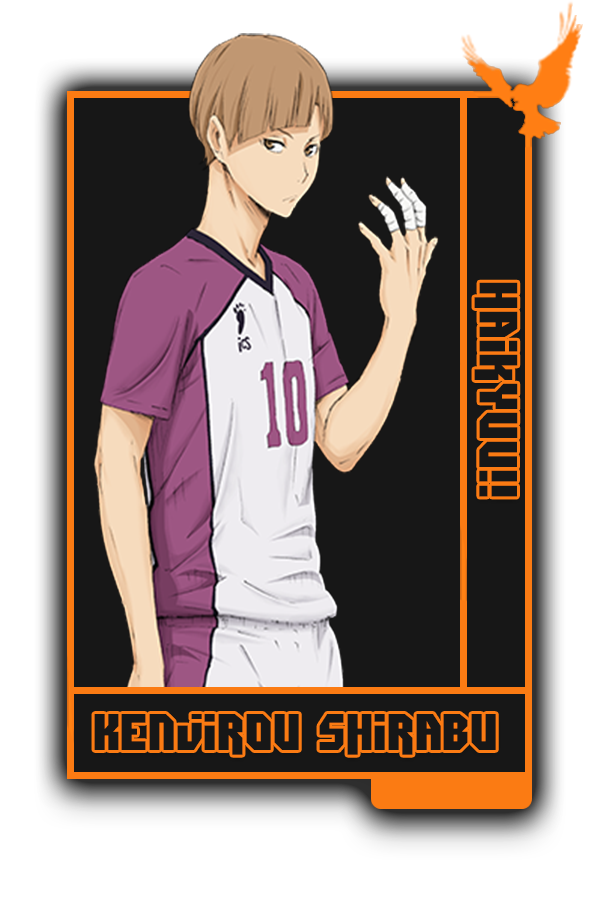
<style>
.page{position:relative;width:600px;height:900px;background:#171717}
.page>*{position:absolute;margin:0}
.t1{font:53.7px "Dimitri";color:#171717}
.t2{font:51.3px "Dimitri";color:#171717}
</style>
<div class="page">
<p class="t1" style="left:474px;top:282px;width:44px;height:215px;rotate:90deg">Haikyuu!!</p>
<p class="t2" style="left:94px;top:714px;width:402px;height:41px">Kenjirou Shirabu</p>
</div>
